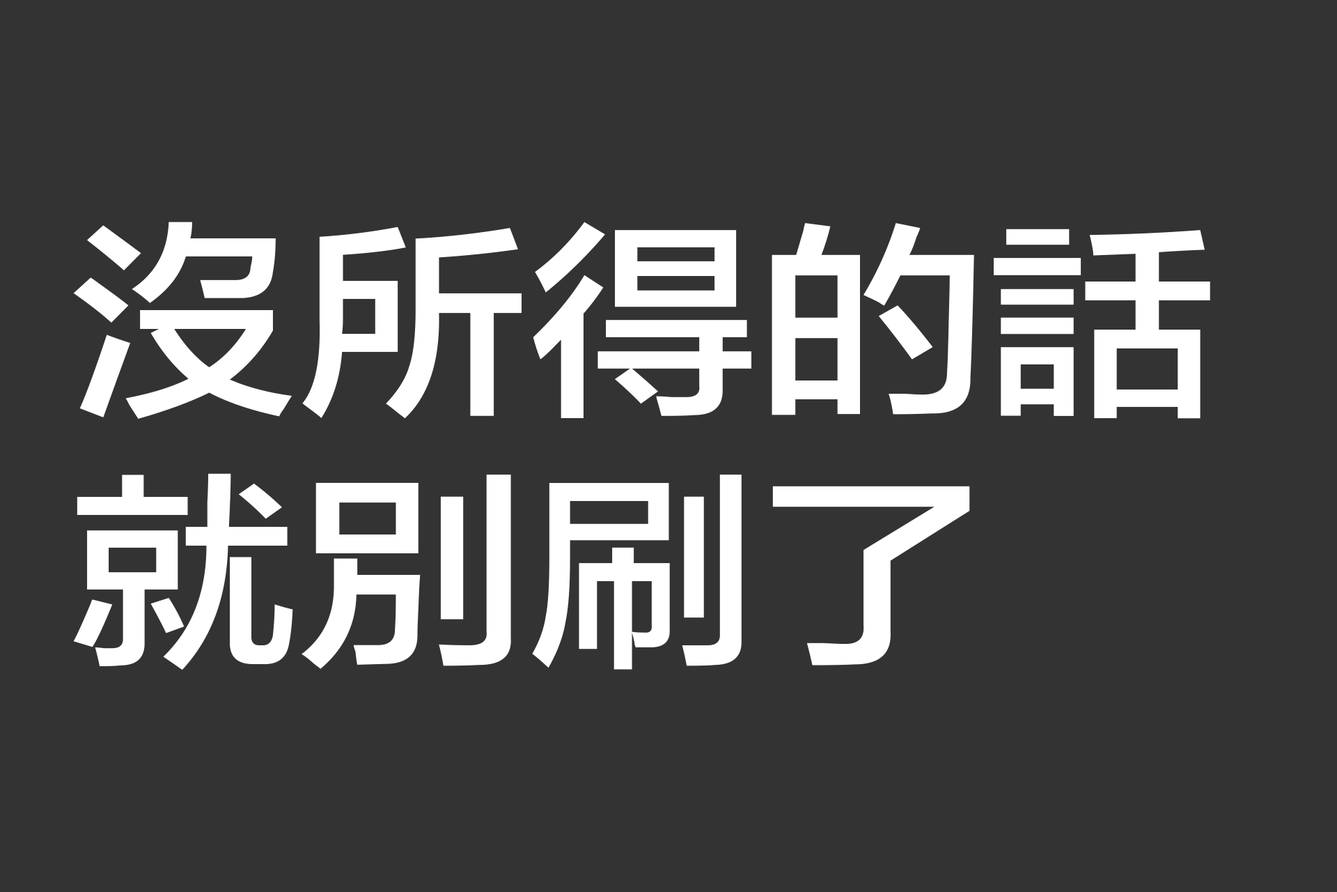
<style>
.page{position:relative;width:1337px;height:892px;background:#333333}
.page>*{position:absolute;margin:0}
.t1{font:209px "FZLTZHB--B51-0";color:#ffffff;text-transform:uppercase;scale:1.1 1}
</style>
<div class="page">
<p class="t1" style="left:73px;top:222px;width:1138px;height:448px">沒所得的話<br>就別刷了</p>
</div>
